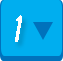
<style>
.page{position:relative;width:63px;height:61px;background:#00aeef}
.page>*{position:absolute;margin:0}
.t1{font:37.5px "BigNoodleTitling";color:#ffffff;font-style:italic}
</style>
<div class="page">
<p class="t1" style="left:15px;top:15px;width:7px;height:27px">1</p>
</div>
